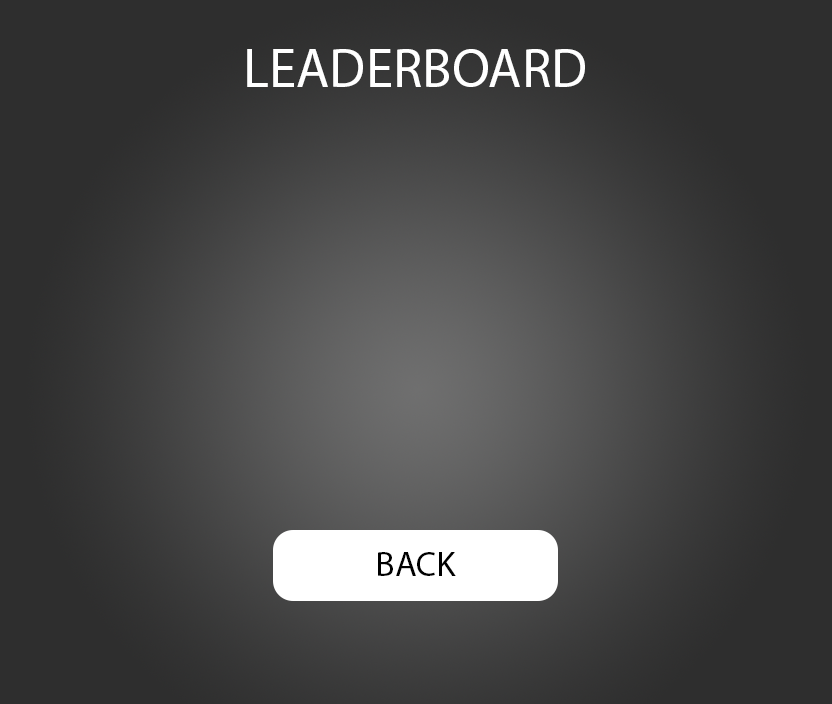
<style>
.page{position:relative;width:832px;height:704px;background:#2e2e2e}
.page>*{position:absolute;margin:0}
.t1{font:54.7px "MyriadPro-Regular";color:#ffffff}
.t2{font:35.4px "MyriadPro-Regular";color:#000000}
</style>
<div class="page">
<p class="t1" style="left:247px;top:49px;width:338px;height:38px">LEADERBOARD</p>
<p class="t2" style="left:378px;top:552px;width:78px;height:24px">BACK</p>
</div>
